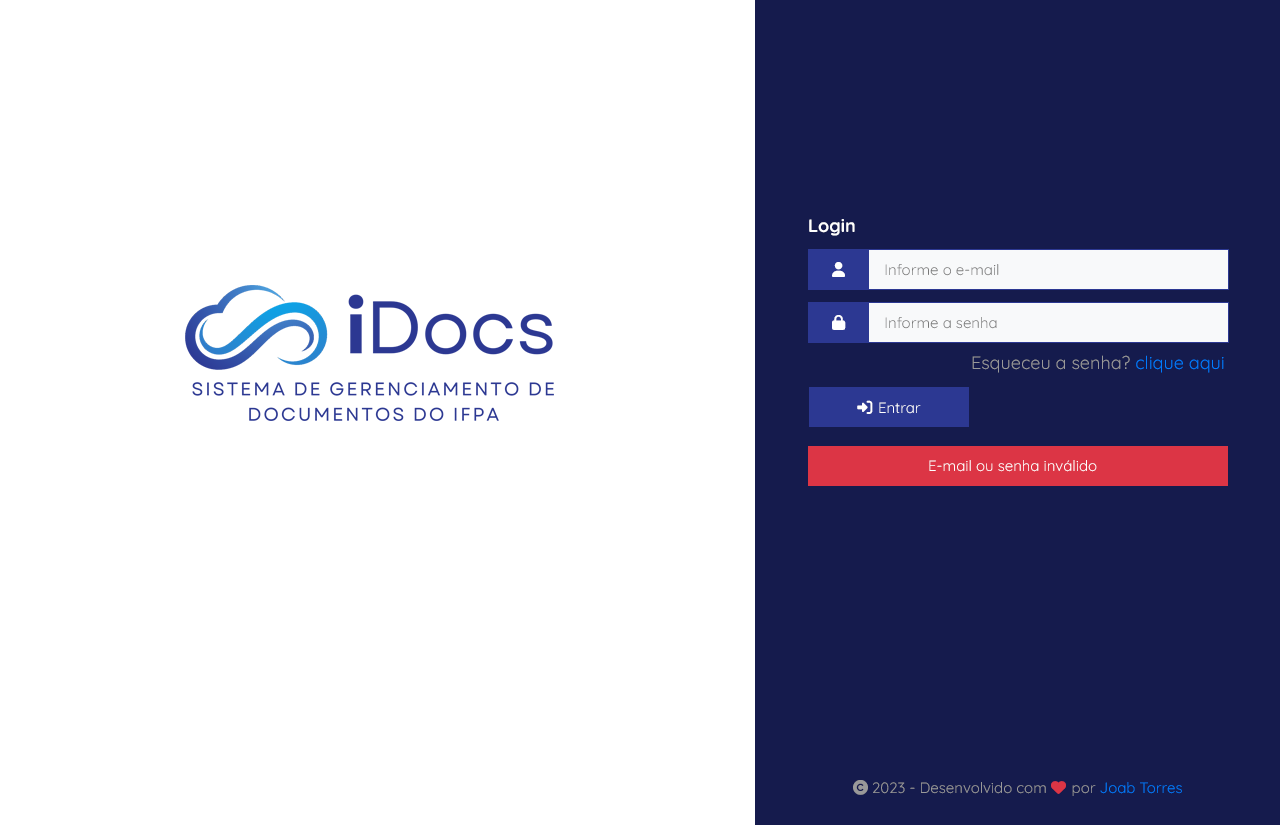
<style>
.page{position:relative;width:1280px;height:825px;background:#ffffff}
.page>*{position:absolute;margin:0}
.t1{font:18px "Quicksand-Bold";color:#ffffff}
.t2{font:15px "Quicksand-Regular";color:#777777}
.t3{font:18px "Quicksand-Regular";color:#999999}
.t4{font:18px "Quicksand-Regular";color:#007bff}
.t5{font:15px "Quicksand-Regular";color:#ffffff}
.t6{font:15px "Quicksand-Regular";color:#999999}
.t7{font:15px "FontAwesome6Free-Solid";color:#999999}
.t8{font:15px "FontAwesome6Free-Solid";color:#dc3545}
.t9{font:15px "Quicksand-Regular";color:#007bff}
</style>
<div class="page">
<p class="t1" style="left:809px;top:219px;width:46px;height:17px">Login</p>
<p class="t2" style="left:885px;top:264px;width:114px;height:12px">Informe o e-mail</p>
<p class="t2" style="left:885px;top:317px;width:112px;height:12px">Informe a senha</p>
<p class="t3" style="left:972px;top:355px;width:252px;height:18px">Esqueceu a senha? <span class="t4">clique aqui</span></p>
<p class="t5" style="left:929px;top:460px;width:168px;height:12px">E-mail ou senha inválido</p>
<p class="t6" style="left:853px;top:780px;width:329px;height:16px"><span class="t7">copyright</span> 2023 - Desenvolvido com <span class="t8">heart </span>por <span class="t9">Joab Torres</span></p>
</div>
